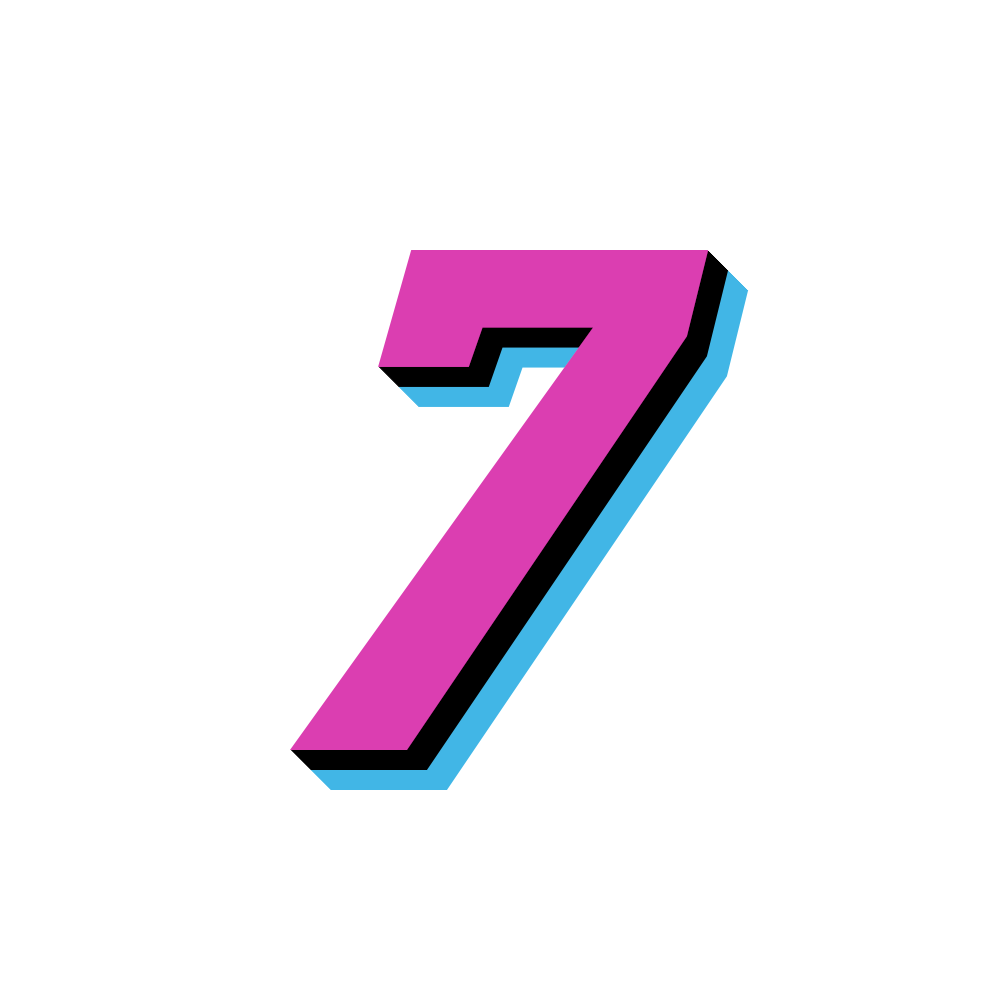
<style>
.page{position:relative;width:1000px;height:1000px;background:#ffffff}
.page>*{position:absolute;margin:0}
.t1{font:625px "NBAHeat";color:#db3eb1}
</style>
<div class="page">
<p class="t1" style="left:290px;top:250px;width:419px;height:500px">7</p>
</div>
